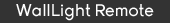
<style>
.page{position:relative;width:170px;height:23px;background:#333333}
.page>*{position:absolute;margin:0}
.t1{font:17px "Young";color:#ffffff}
</style>
<div class="page">
<p class="t1" style="left:16px;top:4px;width:138px;height:17px">WallLight Remote</p>
</div>
